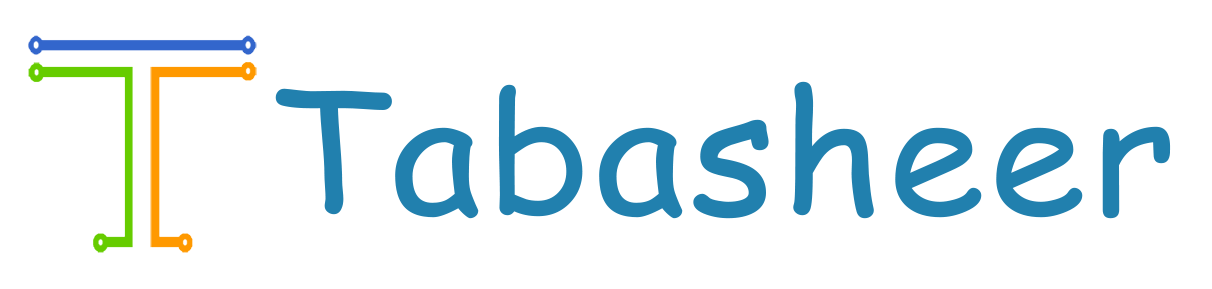
<style>
.page{position:relative;width:1212px;height:289px;background:#ffffff}
.page>*{position:absolute;margin:0}
.t1{font:167.3px "ComicSansMS";color:#2180ae;font-weight:bold;scale:1.05 1}
</style>
<div class="page">
<p class="t1" style="left:275px;top:81px;width:896px;height:138px">Tabasheer</p>
</div>
